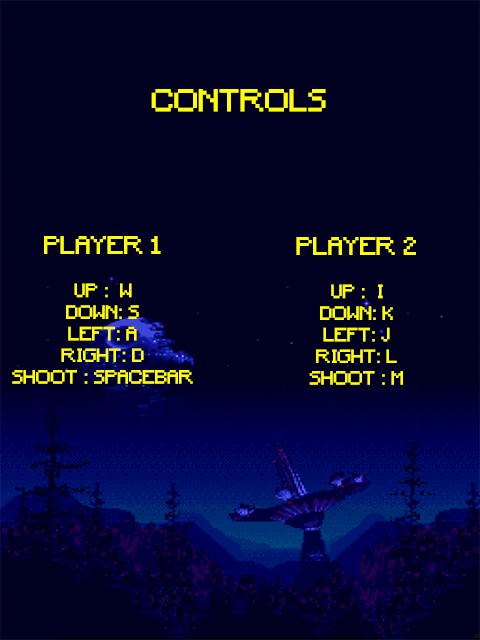
<style>
.page{position:relative;width:480px;height:640px;background:#000020}
.page>*{position:absolute;margin:0}
.t1{font:30px "Minecraft";letter-spacing:0.005em;color:#ffff00}
.t2{font:18px "Minecraft";letter-spacing:0.005em;color:#ffff00}
.t3{font:24px "Minecraft";letter-spacing:0.005em;color:#ffff00}
</style>
<div class="page">
<p class="t1" style="left:151px;top:89px;width:175px;height:23px">CONTROLS</p>
<p class="t2" style="left:12px;top:236px;width:181px;height:148px;text-align:center"><span class="t3">PLAYER 1 <br></span><br>UP :  W<br>DOWN: S<br>LEFT: A<br>RIGHT: D<br>SHOOT : SPACEBAR</p>
<p class="t2" style="left:296px;top:237px;width:120px;height:148px;text-align:center"><span class="t3">PLAYER 2<br></span><br>UP :  I<br>DOWN: K<br>LEFT: J<br>RIGHT: L<br>SHOOT : M</p>
</div>
